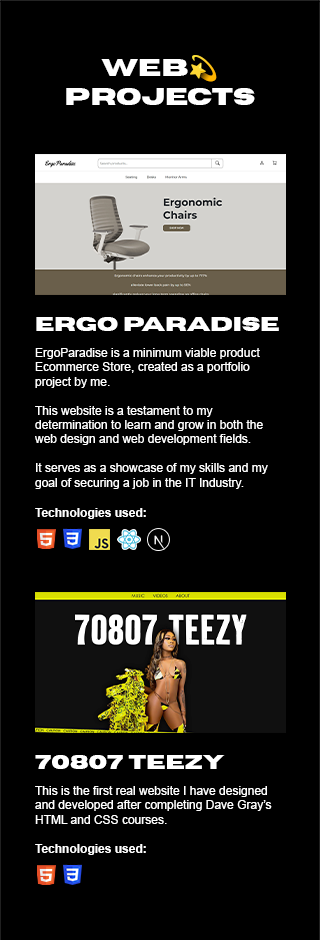
<style>
.page{position:relative;width:320px;height:940px;background:#000000}
.page>*{position:absolute;margin:0}
.t1{font:24px "Horizon-Bold";color:#ffffff}
.t2{font:24px "NotoColorEmoji-SVG";color:#ffffff}
.t3{font:20px "Horizon-Bold";color:#ffffff}
.t4{font:12px "ArialMT";color:#ffffff}
.t5{font:12.1px "Arial-BoldMT";color:#ffffff}
.t6{font:12.1px "ArialMT";color:#ffffff}
.t7{font:12px "Arial-BoldMT";color:#ffffff}
</style>
<div class="page">
<p class="t1" style="left:66px;top:55px;width:189px;height:50px;text-align:center">WEB<span class="t2">💫<br></span>PROJECTS</p>
<p class="t3" style="left:36px;top:317px;width:243px;height:14px">Ergo paradise</p>
<p class="t4" style="left:35px;top:348px;width:233px;height:141px">ErgoParadise is a minimum viable product Ecommerce Store, created as a portfolio project by me.<br><br>This website is a testament to my determination to learn and grow in both the web design and web development fields. <br><br>It serves as a showcase of my skills and my goal of securing a job in the IT Industry.</p>
<p class="t5" style="left:35px;top:508px;width:111px;height:11px"><span class="t6"><br></span>Technologies used:</p>
<p class="t3" style="left:35px;top:755px;width:190px;height:14px">70807 Teezy</p>
<p class="t4" style="left:35px;top:786px;width:237px;height:38px">This is the first real website I have designed and developed after completing Dave Gray’s HTML and CSS courses.</p>
<p class="t7" style="left:35px;top:844px;width:111px;height:11px">Technologies used:</p>
</div>
